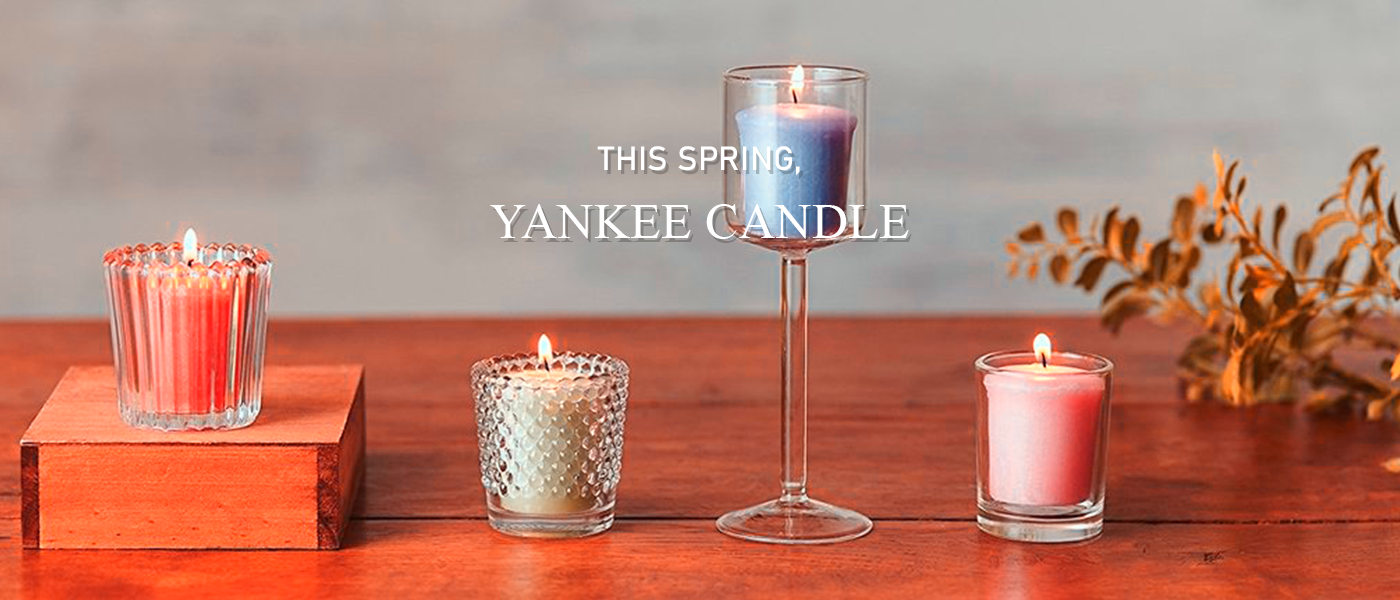
<style>
.page{position:relative;width:1400px;height:600px}
.page>*{position:absolute;margin:0}
.t1{font:49.9px/67.3px "TimesNewRomanPSMT";letter-spacing:0.007em;color:#ffffff}
.t2{font:33.2px/67.3px "Bahnschrift";letter-spacing:0.007em;color:#ffffff}
</style>
<div class="page">
<p class="t1" style="left:490px;top:146px;width:419px;height:93px;text-align:center"><span class="t2">THIS SPRING,<br></span>YANKEE CANDLE</p>
</div>
